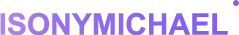
<style>
.page{position:relative;width:239px;height:35px;background:#ffffff}
.page>*{position:absolute;margin:0}
.t1{font:30px "Arial-BoldMT";color:#9169ec}
</style>
<div class="page">
<p class="t1" style="left:0px;top:12px;width:228px;height:24px">ISONYMICHAEL</p>
</div>
